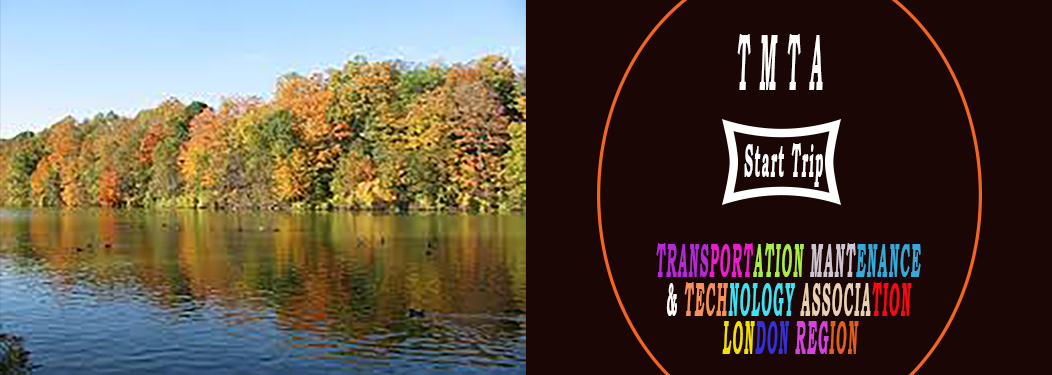
<style>
.page{position:relative;width:1052px;height:375px;background:#1b0606}
.page>*{position:absolute;margin:0}
.t1{font:80.4px "BookmanOldStyle-Bold";letter-spacing:0.1em;color:#ffffff;font-style:italic;scale:0.23 1}
.t2{font:40.2px "BookmanOldStyle-Bold";letter-spacing:0.1em;color:#ffffff;font-style:italic;scale:0.23 1}
.t3{font:48.2px "BookmanOldStyle-Bold";letter-spacing:0.1em;color:#ffffff;font-style:italic;scale:0.27 1}
.t4{font:48.2px/19.3px "BookmanOldStyle-Bold";letter-spacing:0.1em;color:#e9d1b1;font-style:italic;scale:0.27 1}
.t5{font:80.4px/19.3px "BookmanOldStyle-Bold";letter-spacing:0.1em;color:#ffffff;font-style:italic;scale:0.23 1}
.t6{font:48.2px/19.3px "BookmanOldStyle-Bold";letter-spacing:0.1em;color:#b22bd4;font-style:italic;scale:0.27 1}
.t7{font:48.2px/19.3px "BookmanOldStyle-Bold";letter-spacing:0.1em;color:#eb1dcc;font-style:italic;scale:0.27 1}
.t8{font:48.2px/19.3px "BookmanOldStyle-Bold";letter-spacing:0.1em;color:#abed44;font-style:italic;scale:0.27 1}
.t9{font:48.2px/19.3px "BookmanOldStyle-Bold";letter-spacing:0.1em;color:#d2c6d2;font-style:italic;scale:0.27 1}
.t10{font:48.2px/19.3px "BookmanOldStyle-Bold";letter-spacing:0.1em;color:#34a9da;font-style:italic;scale:0.27 1}
.t11{font:48.2px/19.3px "BookmanOldStyle-Bold";letter-spacing:0.1em;color:#ffffff;font-style:italic;scale:0.27 1}
.t12{font:48.2px/19.3px "BookmanOldStyle-Bold";letter-spacing:0.1em;color:#f89057;font-style:italic;scale:0.27 1}
.t13{font:48.2px/19.3px "BookmanOldStyle-Bold";letter-spacing:0.1em;color:#3be5f4;font-style:italic;scale:0.27 1}
.t14{font:48.2px/19.3px "BookmanOldStyle-Bold";letter-spacing:0.1em;color:#f80914;font-style:italic;scale:0.27 1}
.t15{font:48.2px/19.3px "BookmanOldStyle-Bold";letter-spacing:0.1em;color:#f4e007;font-style:italic;scale:0.27 1}
.t16{font:48.2px/19.3px "BookmanOldStyle-Bold";letter-spacing:0.1em;color:#3531d5;font-style:italic;scale:0.27 1}
.t17{font:48.2px/19.3px "BookmanOldStyle-Bold";letter-spacing:0.1em;color:#d642df;font-style:italic;scale:0.27 1}
.t18{font:48.2px/19.3px "BookmanOldStyle-Bold";letter-spacing:0.1em;color:#de601c;font-style:italic;scale:0.27 1}
</style>
<div class="page">
<p class="t1" style="left:737px;top:34px;width:86px;height:56px"><span class="t2"><br><br><br></span>T M T A</p>
<p class="t3" style="left:744px;top:143px;width:79px;height:44px">Start Trip</p>
<p class="t4" style="left:656px;top:243px;width:265px;height:111px"><span class="t5"><br><br><br><br><br><br><br><br><br><br>                   </span><span class="t6">TRANS</span><span class="t7">PORT</span><span class="t8">ATION </span><span class="t9">MANT</span><span class="t10">ENANCE<br></span><span class="t11">     <br>                     &amp; </span><span class="t12">TECH</span><span class="t13">NOLOGY </span>ASSOCIA<span class="t14">TION<br>                      <br>                 </span><span class="t15">LON</span><span class="t16">DON </span><span class="t17">REG</span><span class="t18">ION</span></p>
</div>
